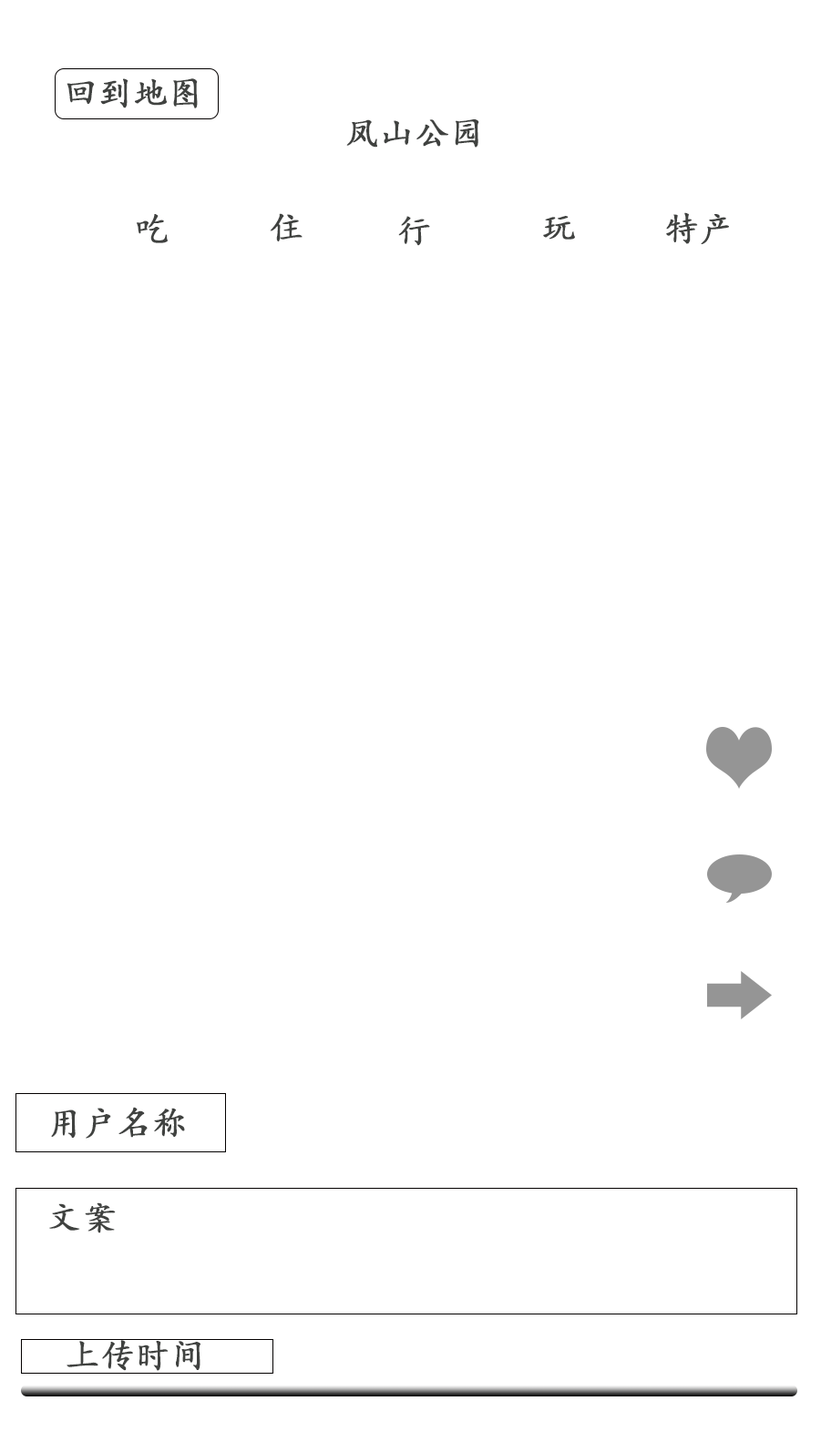
<style>
.page{position:relative;width:821px;height:1452px;background:#ffffff}
.page>*{position:absolute;margin:0}
.t1{font:34.2px "KaiTi";color:#404240;font-weight:bold}
</style>
<div class="page">
<p class="t1" style="left:67px;top:78px;width:131px;height:30px">回到地图图</p>
<p class="t1" style="left:346px;top:119px;width:133px;height:29px">凤山公园</p>
<p class="t1" style="left:137px;top:214px;width:31px;height:29px">吃</p>
<p class="t1" style="left:270px;top:213px;width:33px;height:28px">住</p>
<p class="t1" style="left:398px;top:216px;width:32px;height:30px">行</p>
<p class="t1" style="left:543px;top:216px;width:32px;height:24px">玩</p>
<p class="t1" style="left:666px;top:212px;width:63px;height:32px">特产</p>
<p class="t1" style="left:51px;top:1107px;width:134px;height:32px">用户名称</p>
<p class="t1" style="left:49px;top:1203px;width:67px;height:31px">文案</p>
<p class="t1" style="left:67px;top:1340px;width:133px;height:31px">上传时间</p>
</div>
